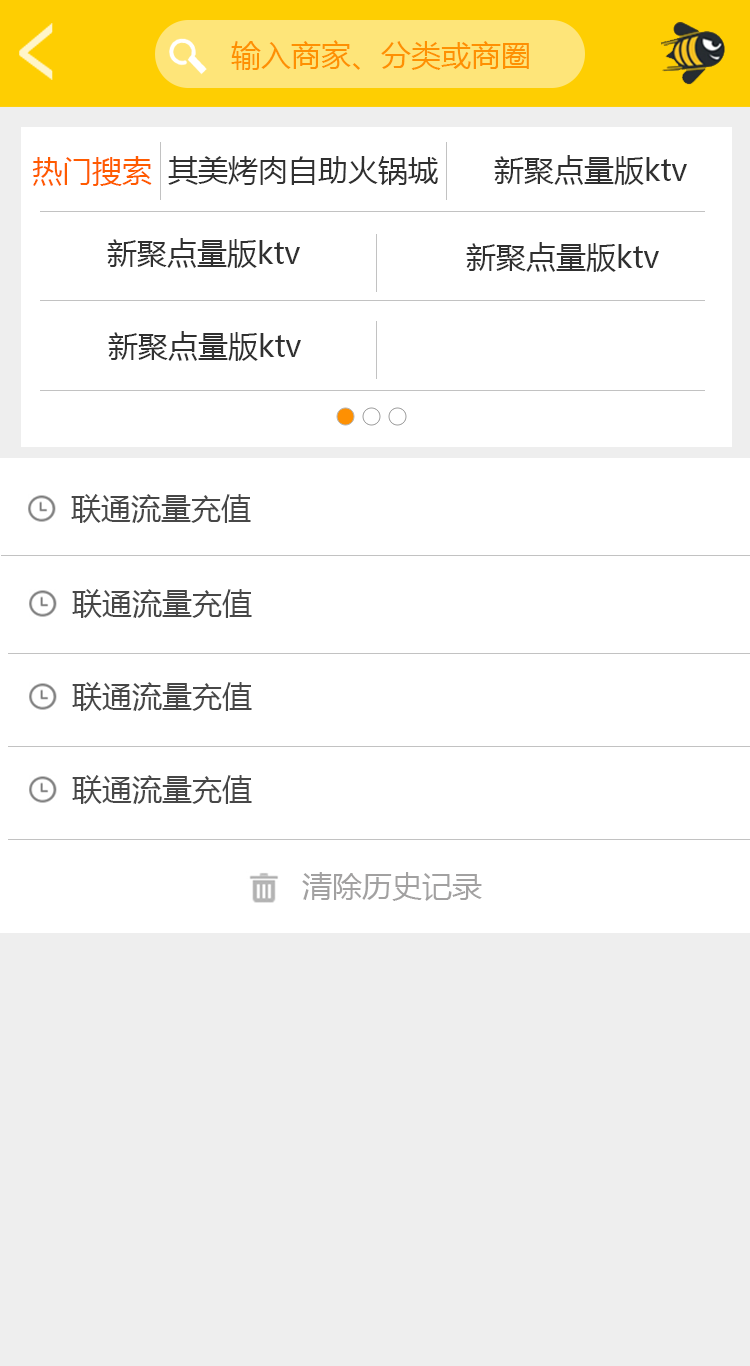
<style>
.page{position:relative;width:750px;height:1366px;background:#ffffff}
.page>*{position:absolute;margin:0}
.t1{font:30px "MicrosoftYaHei";color:#fe9002}
.t2{font:30px "MicrosoftYaHei";color:#ff5b00}
.t3{font:30px "MicrosoftYaHei";color:#303030}
.t4{font:30px "MicrosoftYaHei";color:#474747}
.t5{font:30px "MicrosoftYaHei";color:#a2a1a1}
</style>
<div class="page">
<p class="t1" style="left:231px;top:40px;width:298px;height:30px">输入商家、分类或商圈</p>
<p class="t2" style="left:32px;top:156px;width:120px;height:30px">热门搜索</p>
<p class="t3" style="left:168px;top:156px;width:270px;height:29px">其美烤肉自助火锅城</p>
<p class="t3" style="left:494px;top:155px;width:193px;height:30px">新聚点量版ktv</p>
<p class="t3" style="left:107px;top:238px;width:193px;height:30px">新聚点量版ktv</p>
<p class="t3" style="left:466px;top:242px;width:193px;height:30px">新聚点量版ktv</p>
<p class="t3" style="left:108px;top:331px;width:193px;height:30px">新聚点量版ktv</p>
<p class="t4" style="left:71px;top:494px;width:180px;height:29px">联通流量充值</p>
<p class="t4" style="left:72px;top:589px;width:180px;height:29px">联通流量充值</p>
<p class="t4" style="left:72px;top:682px;width:180px;height:29px">联通流量充值</p>
<p class="t4" style="left:72px;top:775px;width:180px;height:29px">联通流量充值</p>
<p class="t5" style="left:302px;top:872px;width:180px;height:29px">清除历史记录</p>
</div>
